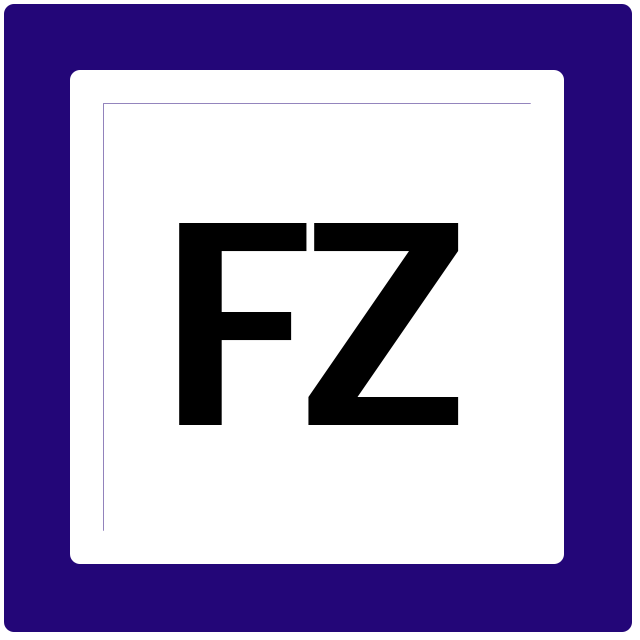
<style>
.page{position:relative;width:640px;height:640px;background:#ffffff}
.page>*{position:absolute;margin:0}
.t1{font:280px "LucidaSans-Demi";color:#000000}
</style>
<div class="page">
<p class="t1" style="left:179px;top:223px;width:128px;height:202px">F</p>
<p class="t1" style="left:308px;top:223px;width:151px;height:202px">Z</p>
</div>
